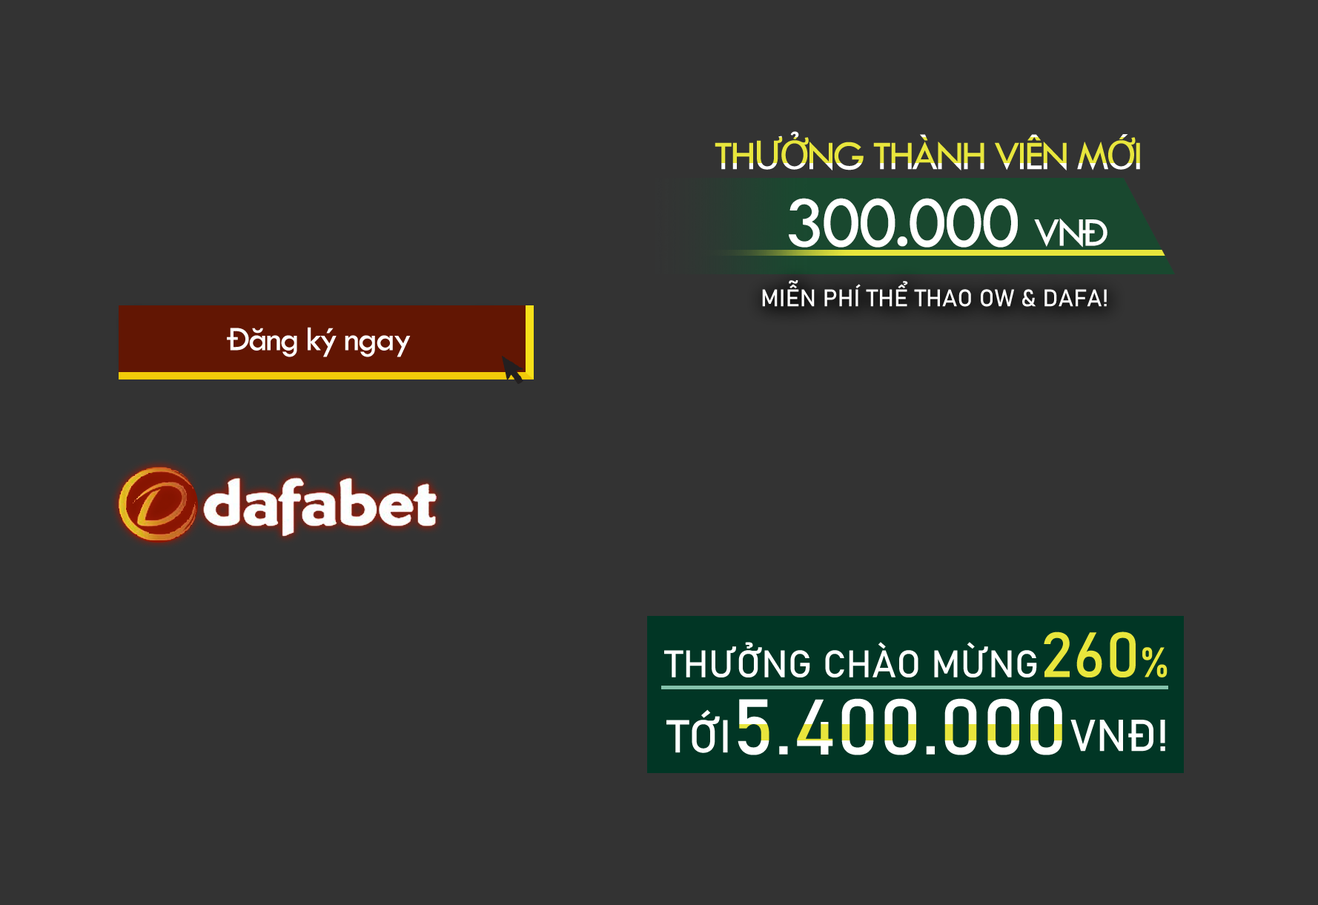
<style>
.page{position:relative;width:1318px;height:905px;background:#333333}
.page>*{position:absolute;margin:0}
.t1{font:42px "TwCenMT-Regular";letter-spacing:-0.075em;color:#e8e63c;font-weight:bold}
.t2{font:42px "MyriadPro-Regular";letter-spacing:-0.075em;color:#e8e63c;font-weight:bold}
.t3{font:73.3px "TwCenMT-Regular";letter-spacing:-0.075em;color:#ffffff;font-weight:bold}
.t4{font:42px "TwCenMT-Regular";letter-spacing:-0.075em;color:#ffffff;font-weight:bold}
.t5{font:23.8px "Bahnschrift";color:#ffffff;font-weight:bold}
.t6{font:35.5px "TwCenMT-Regular";letter-spacing:-0.075em;color:#ffffff;font-weight:bold}
.t7{font:37.9px "Bahnschrift";color:#ffffff;font-weight:bold}
.t8{font:62.9px "Bahnschrift";color:#e8e63c;font-weight:bold}
.t9{font:41.7px "Bahnschrift";color:#e8e63c;font-weight:bold}
.t10{font:77.3px "Bahnschrift";color:#ffffff;font-weight:bold}
.t11{font:45.5px "Bahnschrift";color:#ffffff;font-weight:bold}
.t12{font:44px "Bahnschrift";color:#ffffff;font-weight:bold}
</style>
<div class="page">
<p class="t1" style="left:714px;top:131px;width:426px;height:39px">TH<span class="t2">ƯỞ</span>NG THÀNH VIÊN M<span class="t2">Ớ</span>I</p>
<p class="t3" style="left:789px;top:198px;width:318px;height:50px">300.000 <span class="t4">VNĐ</span></p>
<p class="t5" style="left:762px;top:280px;width:345px;height:27px">MIỄN PHÍ THỂ THAO OW &amp; DAFA!</p>
<p class="t6" style="left:227px;top:327px;width:184px;height:30px">Đăng ký ngay</p>
<p class="t7" style="left:664px;top:642px;width:373px;height:35px">THƯỞNG CHÀO MỪNG</p>
<p class="t8" style="left:1044px;top:631px;width:123px;height:46px">260<span class="t9">%</span></p>
<p class="t10" style="left:737px;top:698px;width:325px;height:57px">5.400.000</p>
<p class="t11" style="left:666px;top:709px;width:62px;height:44px">TỚI</p>
<p class="t12" style="left:1070px;top:720px;width:95px;height:32px">VNĐ!</p>
</div>
